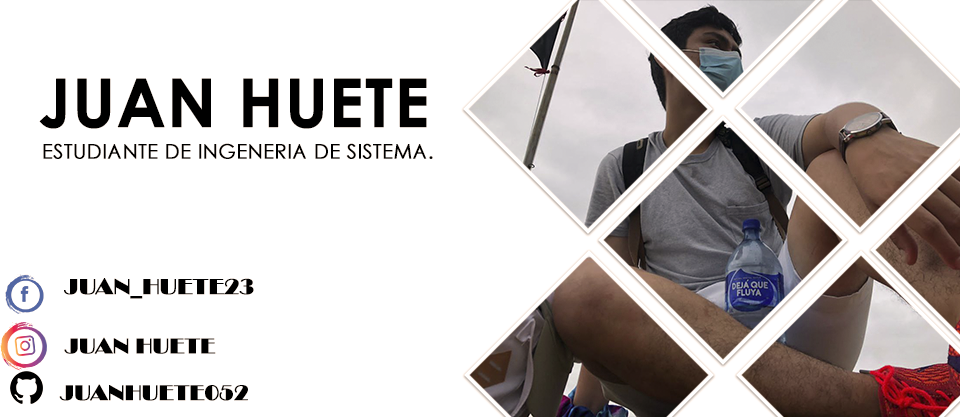
<style>
.page{position:relative;width:960px;height:417px;background:#ffffff}
.page>*{position:absolute;margin:0}
.t1{font:66.8px "CenturyGothic-Bold";color:#000000;text-transform:uppercase;font-weight:bold}
.t2{font:20.3px "CenturyGothic";color:#000000;text-transform:uppercase;font-weight:bold}
.t3{font:22.6px "Broadway";color:#000000;text-transform:uppercase;font-weight:bold}
.t4{font:22px "Broadway";color:#000000;text-transform:uppercase;font-weight:bold}
</style>
<div class="page">
<p class="t1" style="left:39px;top:78px;width:388px;height:51px">Juan Huete</p>
<p class="t2" style="left:43px;top:143px;width:390px;height:16px">Estudiante de ingeneria de sistema.</p>
<p class="t3" style="left:64px;top:278px;width:190px;height:21px">juan_huete23</p>
<p class="t4" style="left:64px;top:337px;width:152px;height:17px">Juan huete</p>
<p class="t4" style="left:59px;top:384px;width:189px;height:17px">juanhuete052</p>
</div>
